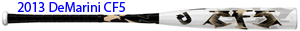
<style>
.page{position:relative;width:300px;height:31px;background:#ffffff}
.page>*{position:absolute;margin:0}
.t1{font:14px "MyriadPro-Regular";color:#0000ff}
</style>
<div class="page">
<p class="t1" style="left:17px;top:2px;width:108px;height:10px">2013 DeMarini CF5</p>
</div>
